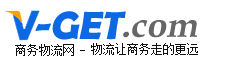
<style>
.page{position:relative;width:234px;height:60px;background:#ffffff}
.page>*{position:absolute;margin:0}
.t1{font:39.8px "BerlinSansFBDemi-Bold";letter-spacing:-0.005em;color:#0c68e3;font-style:italic}
.t2{font:35.8px "BookAntiqua-Bold";letter-spacing:-0.005em;color:#666666;font-style:italic}
.t3{font:11.9px "SimSun";letter-spacing:-0.005em;color:#111111}
</style>
<div class="page">
<p class="t1" style="left:35px;top:11px;width:91px;height:29px">-GET</p>
<p class="t2" style="left:123px;top:20px;width:74px;height:18px">.com</p>
<p class="t3" style="left:15px;top:44px;width:59px;height:12px">商务物流网</p>
<p class="t3" style="left:91px;top:43px;width:107px;height:12px">物流让商务走的更远</p>
</div>
